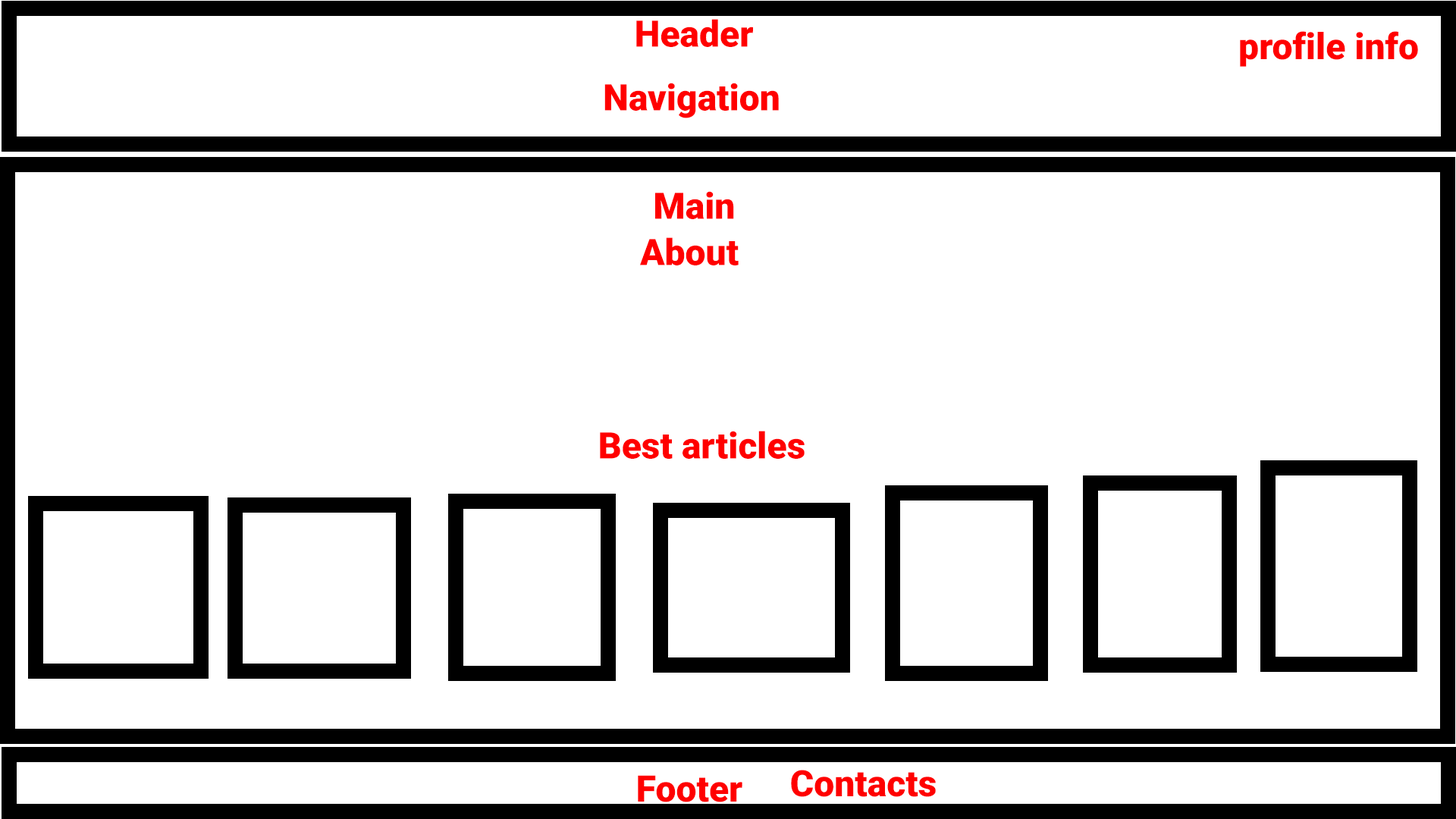
<style>
.page{position:relative;width:1456px;height:819px;background:#ffffff}
.page>*{position:absolute;margin:0}
.t1{font:36.4px "Roboto-Black";color:#ff0000}
</style>
<div class="page">
<p class="t1" style="left:636px;top:19px;width:117px;height:28px">Header</p>
<p class="t1" style="left:1240px;top:31px;width:178px;height:36px">profile info</p>
<p class="t1" style="left:604px;top:83px;width:175px;height:35px">Navigation</p>
<p class="t1" style="left:655px;top:191px;width:79px;height:28px">Main</p>
<p class="t1" style="left:640px;top:237px;width:99px;height:28px">About</p>
<p class="t1" style="left:600px;top:431px;width:205px;height:28px">Best articles</p>
<p class="t1" style="left:791px;top:770px;width:145px;height:27px">Contacts</p>
<p class="t1" style="left:638px;top:775px;width:104px;height:27px">Footer</p>
</div>
